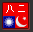
<style>
.page{position:relative;width:33px;height:32px;background:#f20000}
.page>*{position:absolute;margin:0}
.t1{font:10.4px "SimSun";color:#ffffff}
</style>
<div class="page">
<p class="t1" style="left:6px;top:5px;width:19px;height:8px">八二</p>
</div>
